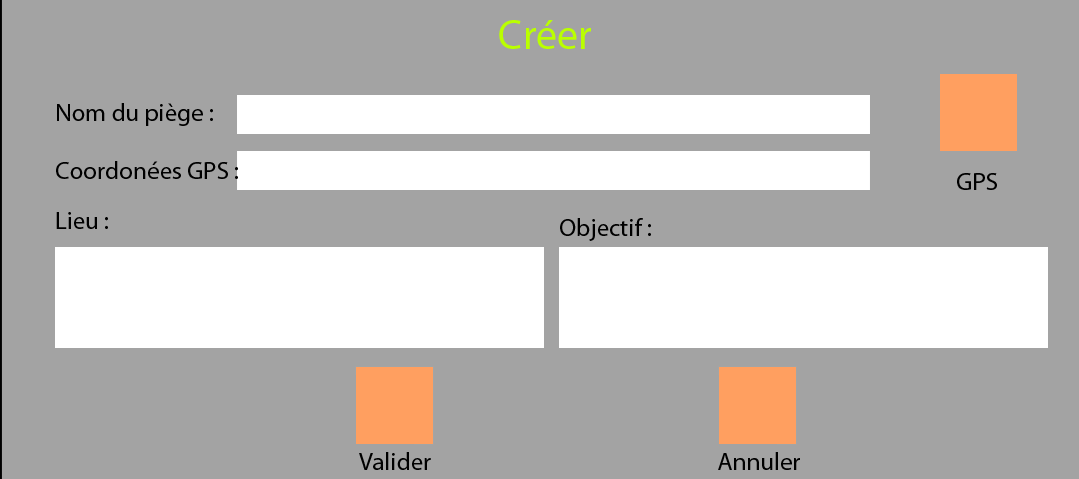
<style>
.page{position:relative;width:1079px;height:479px;background:#a3a3a3}
.page>*{position:absolute;margin:0}
.t1{font:41.7px "MyriadPro-Regular";color:#baff00}
.t2{font:25px "MyriadPro-Regular";color:#000000}
</style>
<div class="page">
<p class="t1" style="left:499px;top:20px;width:92px;height:29px">Créer</p>
<p class="t2" style="left:57px;top:103px;width:156px;height:23px">Nom du piège :</p>
<p class="t2" style="left:56px;top:161px;width:182px;height:18px">Coordonées GPS :</p>
<p class="t2" style="left:957px;top:173px;width:40px;height:17px">GPS</p>
<p class="t2" style="left:56px;top:212px;width:52px;height:17px">Lieu :</p>
<p class="t2" style="left:560px;top:218px;width:91px;height:23px">Objectif :</p>
<p class="t2" style="left:359px;top:452px;width:72px;height:18px">Valider</p>
<p class="t2" style="left:718px;top:452px;width:82px;height:18px">Annuler</p>
</div>
